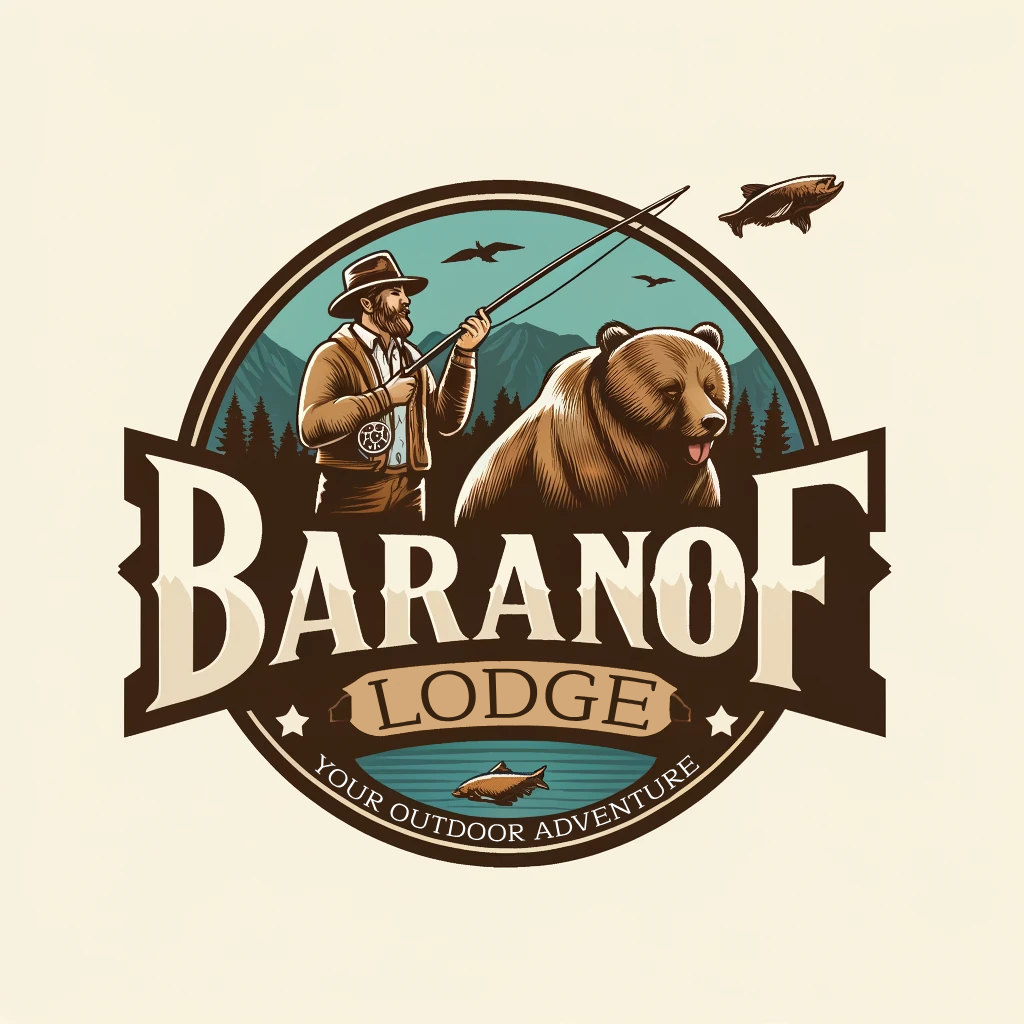
<style>
.page{position:relative;width:1024px;height:1024px;background:#f9f2e0}
.page>*{position:absolute;margin:0}
.t1{font:70.5px "Maitree";color:#37210f;scale:1.15 1}
.t2{font:24px "Maitree";color:#ffffff}
</style>
<div class="page">
<p class="t1" style="left:367px;top:668px;width:290px;height:62px">LODGE</p>
<p class="t2" style="left:314px;top:753px;width:386px;height:89px">YOUR OUTDOOR ADVENTURE</p>
</div>
